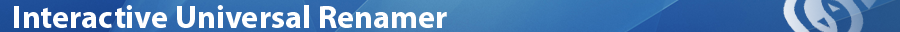
<style>
.page{position:relative;width:900px;height:32px}
.page>*{position:absolute;margin:0}
.t1{font:32.4px "MyriadPro-Bold";color:#ffffff}
</style>
<div class="page">
<p class="t1" style="left:14px;top:5px;width:433px;height:23px">Interactive Universal Renamer</p>
</div>
